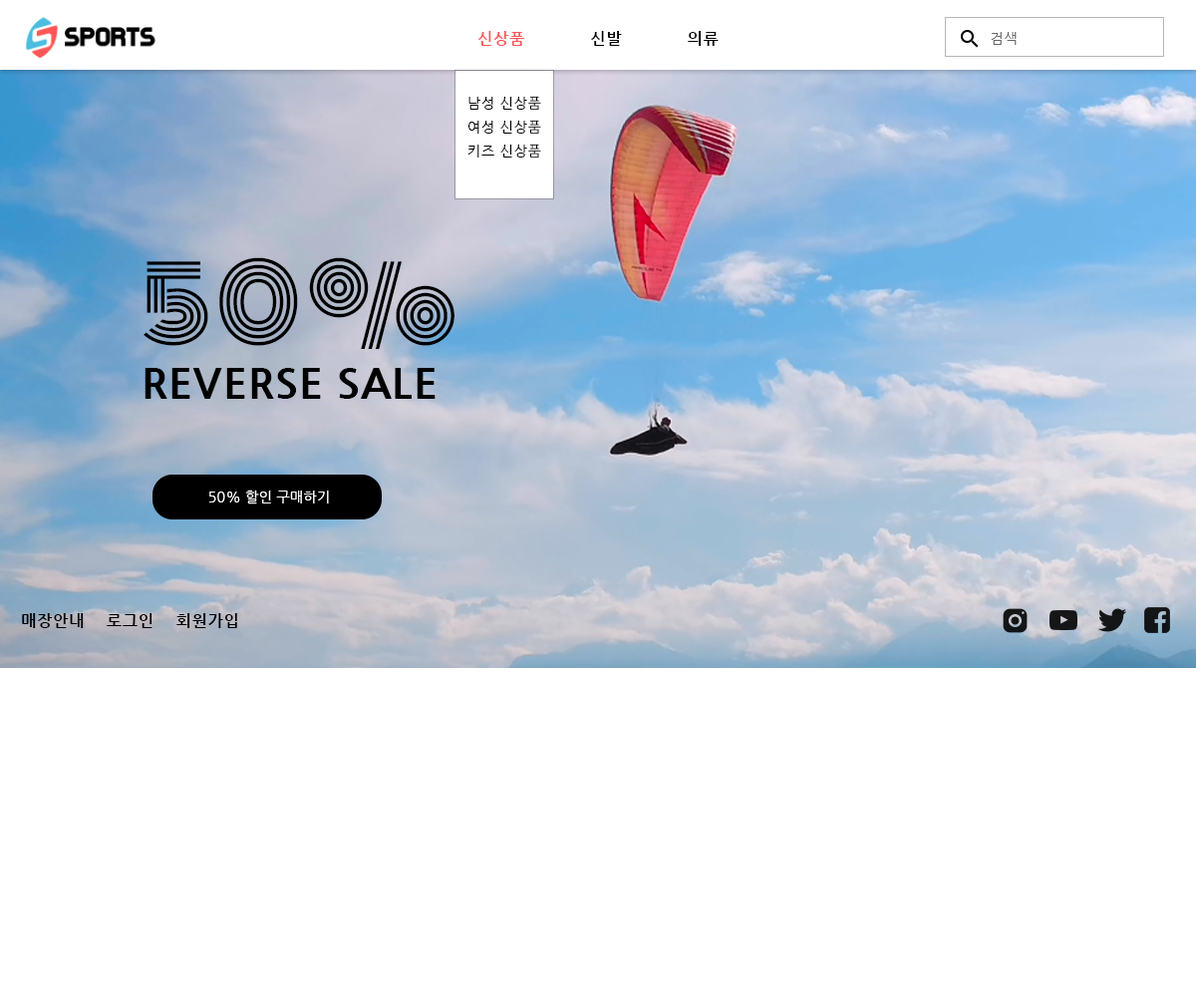
<style>
.page{position:relative;width:1196px;height:997px;background:#ffffff}
.page>*{position:absolute;margin:0}
.t1{font:15.9px "NanumGothicBold";letter-spacing:0.06em;color:#000000;text-transform:uppercase}
.t2{font:15.9px "NanumGothicBold";letter-spacing:0.06em;color:#ff5758;text-transform:uppercase}
.t3{font:14px "NanumGothic";letter-spacing:0.06em;color:#666666}
.t4{font:14px/23.9px "NanumGothic";letter-spacing:0.06em;color:#000000}
.t5{font:99.7px "Monoton-Regular";letter-spacing:0.06em;color:#000000;text-transform:uppercase}
.t6{font:41.9px "NanumGothicExtraBold";letter-spacing:0.025em;color:#000000;text-transform:uppercase}
.t7{font:14px "NanumGothic";letter-spacing:0.025em;color:#ffffff;text-transform:uppercase}
</style>
<div class="page">
<p class="t1" style="left:477px;top:31px;width:242px;height:15px"><span class="t2">신상품</span>            신발            의류</p>
<p class="t3" style="left:991px;top:32px;width:26px;height:13px">검색</p>
<p class="t4" style="left:468px;top:96px;width:73px;height:62px">남성 신상품 <br>여성 신상품<br>키즈 신상품</p>
<p class="t5" style="left:144px;top:257px;width:311px;height:92px">50%</p>
<p class="t6" style="left:145px;top:368px;width:291px;height:31px">REVERSE SALE</p>
<p class="t7" style="left:209px;top:489px;width:120px;height:15px">50% 할인 구매하기</p>
<p class="t1" style="left:22px;top:613px;width:215px;height:15px">매장안내    로그인    회원가입</p>
</div>
